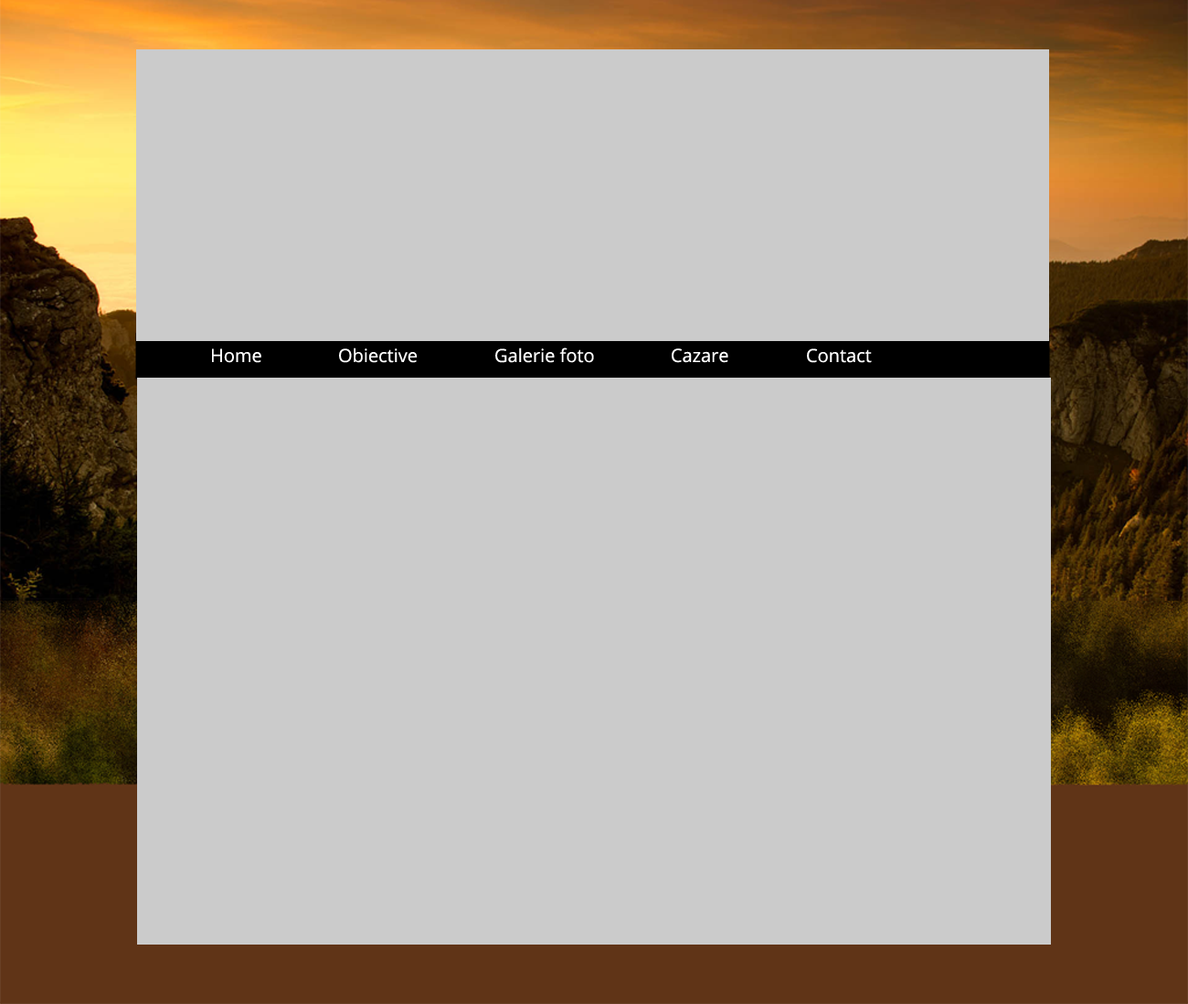
<style>
.page{position:relative;width:1188px;height:1004px;background:#cbcbcb}
.page>*{position:absolute;margin:0}
.t1{font:18.3px "OpenSans";color:#ffffff}
</style>
<div class="page">
<p class="t1" style="left:212px;top:348px;width:49px;height:15px">Home</p>
<p class="t1" style="left:339px;top:347px;width:78px;height:16px">Obiective</p>
<p class="t1" style="left:495px;top:347px;width:99px;height:16px">Galerie foto</p>
<p class="t1" style="left:672px;top:348px;width:56px;height:15px">Cazare</p>
<p class="t1" style="left:807px;top:348px;width:65px;height:15px">Contact</p>
</div>
